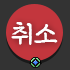
<style>
.page{position:relative;width:70px;height:70px;background:#333333}
.page>*{position:absolute;margin:0}
.t1{font:26.7px "ChosunCentennial";letter-spacing:-0.01em;color:#ffffff}
</style>
<div class="page">
<p class="t1" style="left:11px;top:22px;width:47px;height:23px">취소</p>
</div>
